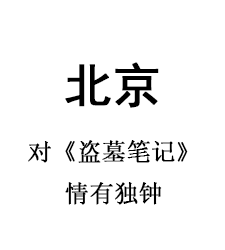
<style>
.page{position:relative;width:225px;height:250px;background:#ffffff}
.page>*{position:absolute;margin:0}
.t1{font:48px "SimHei";color:#000000;font-weight:bold}
.t2{font:24px "NSimSun";color:#000000;font-weight:bold}
</style>
<div class="page">
<p class="t1" style="left:65px;top:62px;width:94px;height:46px">北京</p>
<p class="t2" style="left:28px;top:140px;width:160px;height:65px;text-align:center">对《盗墓笔记》<br>情有独钟</p>
</div>
